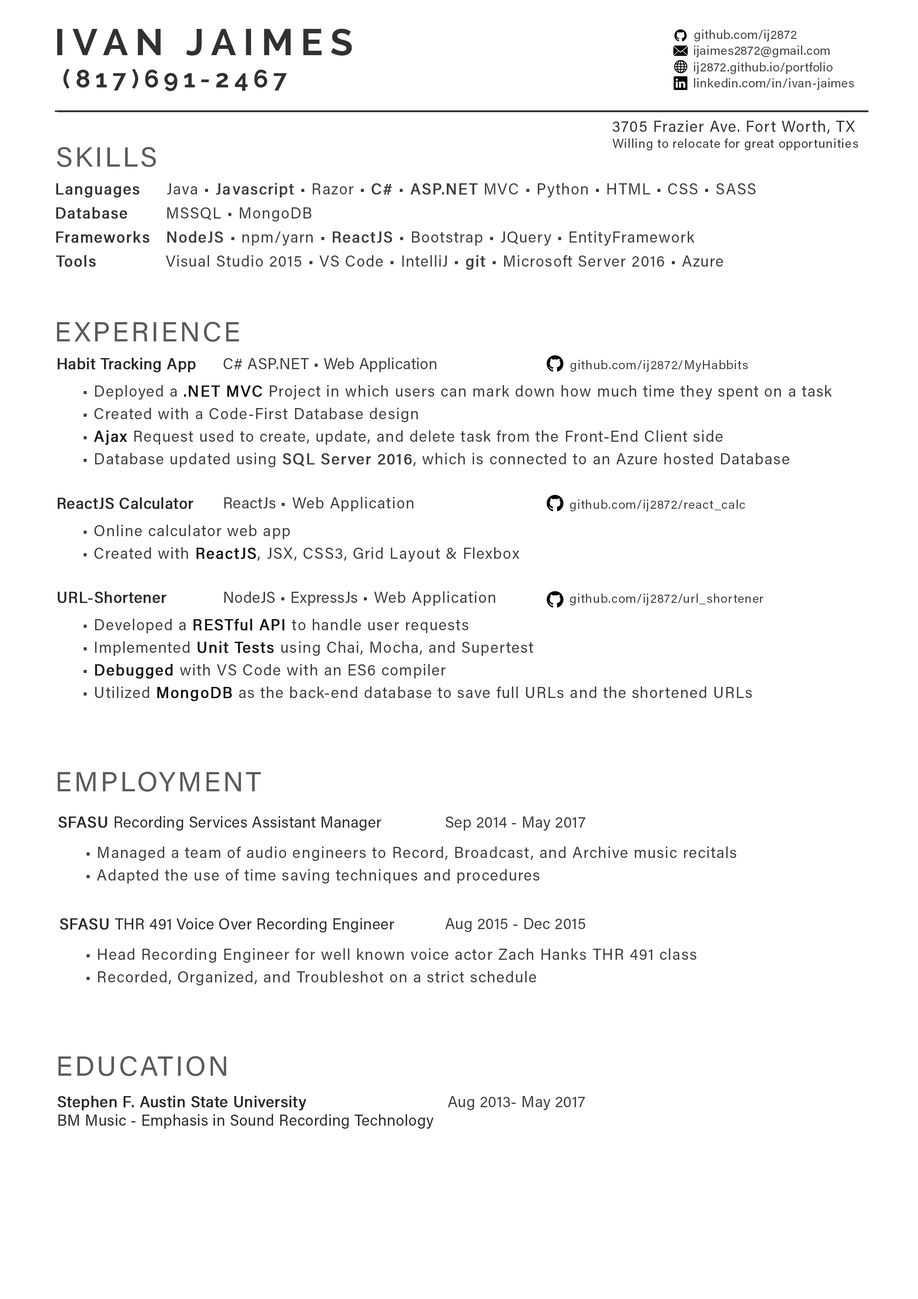
<style>
.page{position:relative;width:918px;height:1299px;background:#ffffff}
.page>*{position:absolute;margin:0}
.t1{font:37px "Raleway-Bold";letter-spacing:0.2em;color:#313131}
.t2{font:12.3px "AcuminPro-Regular";letter-spacing:0.025em;color:#3e3e3e}
.t3{font:24.7px "Raleway-Bold";letter-spacing:0.2em;color:#313131}
.t4{font:15.4px "AcuminPro-Regular";letter-spacing:0.05em;color:#313131}
.t5{font:27.8px "AcuminPro-Regular";letter-spacing:0.075em;color:#5b5b5b}
.t6{font:12.3px "AcuminPro-Regular";letter-spacing:0.05em;color:#313131}
.t7{font:15.4px "AcuminPro-Regular";letter-spacing:0.05em;color:#313131;font-weight:bold}
.t8{font:15.4px "AcuminPro-Regular";letter-spacing:0.05em;color:#3e3e3e}
.t9{font:15.4px "AcuminPro-Regular";letter-spacing:0.05em;color:#3e3e3e;font-weight:bold}
.t10{font:15.4px "AcuminPro-Regular";letter-spacing:0.01em;color:#282828;font-weight:bold}
.t11{font:15.4px "AcuminPro-Regular";letter-spacing:0.01em;color:#3e3e3e}
.t12{font:12.3px "AcuminPro-Regular";letter-spacing:0.05em;color:#3e3e3e}
.t13{font:15.4px "AcuminPro-Regular";letter-spacing:0.05em;color:#121212;font-weight:bold}
.t14{font:15.4px "AcuminPro-Regular";letter-spacing:0.01em;color:#292929;font-weight:bold}
.t15{font:15.4px "AcuminPro-Regular";letter-spacing:0.01em;color:#292929}
</style>
<div class="page">
<p class="t1" style="left:57px;top:29px;width:295px;height:27px">IVAN JAIMES</p>
<p class="t2" style="left:695px;top:30px;width:102px;height:11px">github.com/ij2872</p>
<p class="t2" style="left:694px;top:46px;width:136px;height:11px">ijaimes2872@gmail.com</p>
<p class="t2" style="left:694px;top:62px;width:139px;height:12px">ij2872.github.io/portfolio</p>
<p class="t3" style="left:63px;top:68px;width:224px;height:23px">(817)691-2467</p>
<p class="t2" style="left:694px;top:78px;width:160px;height:12px">linkedin.com/in/ivan-jaimes</p>
<p class="t4" style="left:613px;top:120px;width:242px;height:14px">3705 Frazier Ave. Fort Worth, TX</p>
<p class="t5" style="left:57px;top:147px;width:99px;height:20px">SKILLS</p>
<p class="t6" style="left:613px;top:138px;width:245px;height:12px">Willing to relocate for great opportunities</p>
<p class="t7" style="left:56px;top:183px;width:84px;height:15px">Languages</p>
<p class="t8" style="left:167px;top:183px;width:589px;height:15px">Java • <span class="t9">Javascript </span>• Razor • <span class="t9">C# </span>• <span class="t9">ASP.NET </span>MVC • Python • HTML • CSS • SASS</p>
<p class="t7" style="left:56px;top:207px;width:71px;height:12px">Database</p>
<p class="t8" style="left:167px;top:207px;width:144px;height:14px">MSSQL • MongoDB</p>
<p class="t7" style="left:56px;top:231px;width:94px;height:12px">Frameworks</p>
<p class="t8" style="left:167px;top:231px;width:528px;height:14px"><span class="t9">NodeJS </span>• npm/yarn • <span class="t9">ReactJS </span>• Bootstrap • JQuery • EntityFramework</p>
<p class="t7" style="left:56px;top:255px;width:40px;height:12px">Tools</p>
<p class="t8" style="left:166px;top:255px;width:557px;height:15px">Visual Studio 2015 • VS Code • IntelliJ • <span class="t9">git </span>• Microsoft Server 2016 • Azure</p>
<p class="t5" style="left:57px;top:322px;width:182px;height:20px">EXPERIENCE</p>
<p class="t10" style="left:58px;top:358px;width:138px;height:14px">Habit Tracking App</p>
<p class="t11" style="left:224px;top:358px;width:212px;height:14px">C# ASP.NET • Web Application</p>
<p class="t12" style="left:571px;top:360px;width:177px;height:12px">github.com/ij2872/MyHabbits</p>
<p class="t8" style="left:84px;top:385px;width:748px;height:14px">• Deployed a <span class="t13">.NET MVC</span> Project in which users can mark down how much time they spent on a task</p>
<p class="t8" style="left:84px;top:408px;width:334px;height:14px">• Created with a Code-First Database design</p>
<p class="t8" style="left:84px;top:430px;width:639px;height:15px">• <span class="t13">Ajax </span>Request used to create, update, and delete task from the Front-End Client side</p>
<p class="t8" style="left:84px;top:453px;width:705px;height:14px">• Database updated using <span class="t9">SQL Server 2016</span>, which is connected to an Azure hosted Database</p>
<p class="t14" style="left:58px;top:497px;width:135px;height:12px">ReactJS Calculator</p>
<p class="t8" style="left:224px;top:497px;width:190px;height:14px"><span class="t11">ReactJs </span>• Web Application</p>
<p class="t12" style="left:570px;top:499px;width:175px;height:12px">github.com/ij2872/react_calc</p>
<p class="t8" style="left:84px;top:525px;width:206px;height:14px">• Online calculator web app</p>
<p class="t8" style="left:84px;top:547px;width:435px;height:15px">• Created with <span class="t13">ReactJS</span>, JSX, CSS3, Grid Layout &amp; Flexbox</p>
<p class="t14" style="left:58px;top:591px;width:108px;height:12px">URL-Shortener</p>
<p class="t11" style="left:224px;top:591px;width:271px;height:15px">NodeJS • ExpressJs <span class="t8">• Web Application</span></p>
<p class="t12" style="left:570px;top:593px;width:193px;height:12px">github.com/ij2872/url_shortener</p>
<p class="t8" style="left:84px;top:619px;width:384px;height:14px">• Developed a <span class="t13">RESTful API </span>to handle user requests</p>
<p class="t8" style="left:84px;top:641px;width:449px;height:15px">• Implemented <span class="t13">Unit Tests </span>using Chai, Mocha, and Supertest</p>
<p class="t8" style="left:84px;top:664px;width:362px;height:15px">• <span class="t13">Debugged </span>with VS Code with an ES6 compiler</p>
<p class="t8" style="left:84px;top:686px;width:668px;height:15px">• Utilized <span class="t13">MongoDB </span>as the back-end database to save full URLs and the shortened URLs</p>
<p class="t5" style="left:58px;top:772px;width:203px;height:20px">EMPLOYMENT</p>
<p class="t15" style="left:58px;top:816px;width:323px;height:14px"><span class="t14">SFASU </span>Recording Services Assistant Manager</p>
<p class="t11" style="left:445px;top:816px;width:140px;height:14px">Sep 2014 - May 2017</p>
<p class="t8" style="left:87px;top:846px;width:649px;height:15px">• Managed a team of audio engineers to Record, Broadcast, and Archive music recitals</p>
<p class="t8" style="left:87px;top:869px;width:452px;height:14px">• Adapted the use of time saving techniques and procedures</p>
<p class="t15" style="left:60px;top:918px;width:334px;height:14px"><span class="t14">SFASU </span>THR 491 Voice Over Recording Engineer</p>
<p class="t11" style="left:445px;top:918px;width:140px;height:14px">Aug 2015 - Dec 2015</p>
<p class="t8" style="left:87px;top:948px;width:609px;height:15px">• Head Recording Engineer for well known voice actor Zach Hanks THR 491 class</p>
<p class="t8" style="left:87px;top:971px;width:449px;height:14px">• Recorded, Organized, and Troubleshot on a strict schedule</p>
<p class="t5" style="left:58px;top:1056px;width:168px;height:20px">EDUCATION</p>
<p class="t15" style="left:57px;top:1095px;width:377px;height:33px"><span class="t14">Stephen F. Austin State University <br></span>BM Music - Emphasis in Sound Recording Technology</p>
<p class="t11" style="left:448px;top:1096px;width:137px;height:14px">Aug 2013- May 2017</p>
</div>
